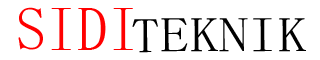
<style>
.page{position:relative;width:320px;height:60px;background:#ffffff}
.page>*{position:absolute;margin:0}
.t1{font:61px "NSimSun";color:#ff0000}
.t2{font:49.3px "NSimSun";color:#000000;scale:1.19 1}
</style>
<div class="page">
<p class="t1" style="left:18px;top:7px;width:115px;height:43px">SIDI</p>
<p class="t2" style="left:132px;top:18px;width:174px;height:35px">TEKNIK</p>
</div>
